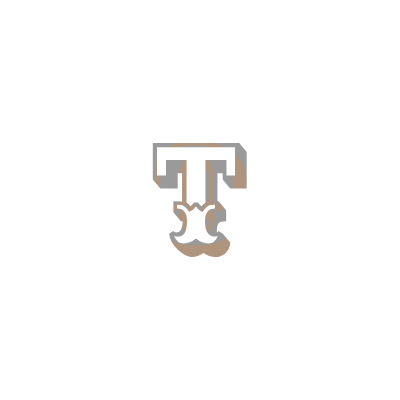
<style>
.page{position:relative;width:400px;height:400px;background:#ffffff}
.page>*{position:absolute;margin:0}
.t1{font:150px "Ewert-Regular";color:#a2978e}
</style>
<div class="page">
<p class="t1" style="left:152px;top:143px;width:95px;height:114px">T</p>
</div>
